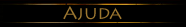
<style>
.page{position:relative;width:186px;height:27px;background:#000000}
.page>*{position:absolute;margin:0}
.t1{font:18px "LithosPro-Regular";color:#9d7730}
</style>
<div class="page">
<p class="t1" style="left:63px;top:6px;width:59px;height:14px">Ajuda</p>
</div>
